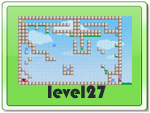
<style>
.page{position:relative;width:150px;height:113px}
.page>*{position:absolute;margin:0}
.t1{font:18.7px "STHupo";color:#272b31}
</style>
<div class="page">
<p class="t1" style="left:48px;top:85px;width:58px;height:14px">level27</p>
</div>
